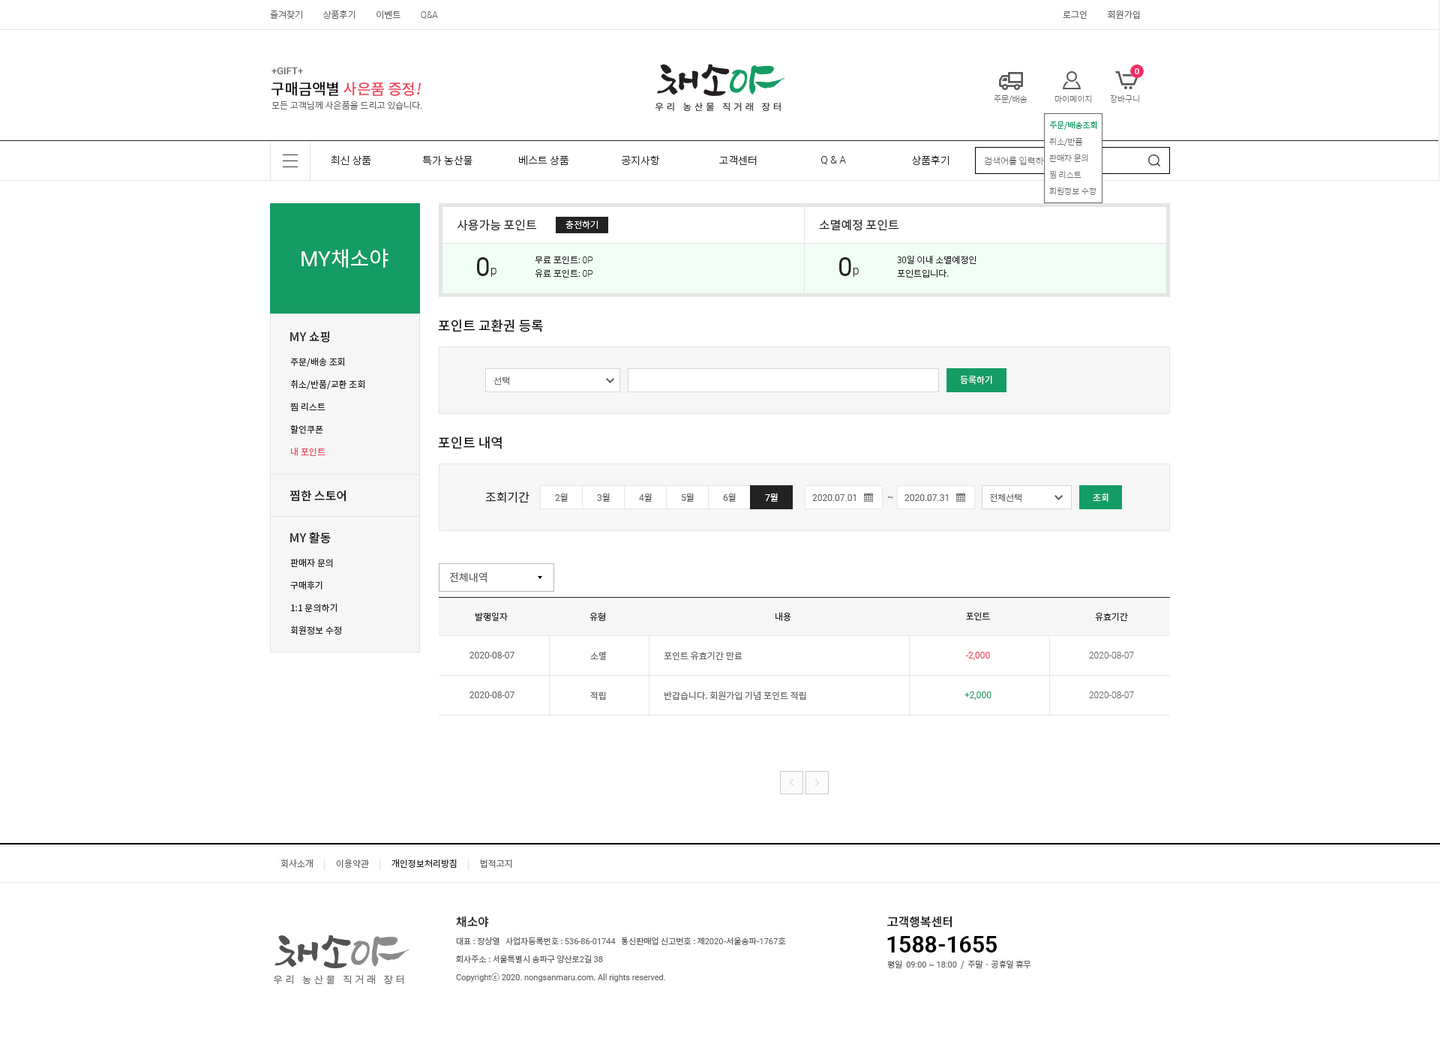
<style>
.page{position:relative;width:1440px;height:1050px;background:#ffffff}
.page>*{position:absolute;margin:0}
.t1{font:9px "NotoSansCJKkr-Light";color:#666666}
.t2{font:9px "Roboto-Light";color:#666666}
.t3{font:9px "NotoSansCJKkr-DemiLight";color:#666666}
.t4{font:9.8px "Roboto-Medium";color:#666666}
.t5{font:15px "NotoSansCJKkr-Medium";color:#ea475c}
.t6{font:15px "NotoSansCJKkr-Medium";color:#000000}
.t7{font:15px "NotoSansCJKkr-Medium";color:#ea475c;font-style:italic}
.t8{font:8.2px "NotoSansCJKkr-Thin";color:#666666}
.t9{font:8.2px/16.5px "NotoSansCJKkr-Thin";color:#666666}
.t10{font:8.2px/16.5px "NotoSansCJKkr-Regular";color:#159c65}
.t11{font:10.5px "NotoSansCJKkr-Light";color:#222222}
.t12{font:10.5px "Roboto-Light";color:#222222}
.t13{font:9px "NotoSansCJKkr-Thin";color:#666666}
.t14{font:12px "NotoSansCJKkr-Regular";color:#222222}
.t15{font:9px "NotoSansCJKkr-Light";color:#ffffff}
.t16{font:21px "NotoSansCJKkr-Regular";color:#ffffff}
.t17{font:21px "Roboto-Regular";color:#ffffff}
.t18{font:26.2px "Roboto-Regular";color:#222222}
.t19{font:12px "Roboto-Light";color:#222222}
.t20{font:9px/13.5px "NotoSansCJKkr-Light";color:#222222}
.t21{font:9px/13.5px "Roboto-Light";color:#222222}
.t22{font:13.5px "NotoSansCJKkr-Regular";color:#000000}
.t23{font:12px "NotoSansCJKkr-Medium";color:#222222}
.t24{font:9px/22.5px "NotoSansCJKkr-Regular";color:#222222}
.t25{font:9px/22.5px "NotoSansCJKkr-Regular";color:#ea475c}
.t26{font:9px "NotoSansCJKkr-Regular";color:#ffffff}
.t27{font:9px "Roboto-Regular";color:#666666}
.t28{font:9px "NotoSansCJKkr-Regular";color:#666666}
.t29{font:9px "Roboto-Regular";color:#ffffff}
.t30{font:10.5px "NotoSansCJKkr-Regular";color:#666666}
.t31{font:9px "NotoSansCJKkr-Regular";color:#222222}
.t32{font:9px "Roboto-Regular";color:#ea475c}
.t33{font:9px "Roboto-Regular";color:#159c65}
</style>
<div class="page">
<p class="t1" style="left:270px;top:10px;width:168px;height:10px">즐겨찾기          상품후기          이벤트          <span class="t2">Q&amp;A</span></p>
<p class="t3" style="left:1063px;top:10px;width:77px;height:10px">로그인          회원가입</p>
<p class="t4" style="left:272px;top:68px;width:31px;height:6px">+GIFT+</p>
<p class="t5" style="left:272px;top:82px;width:150px;height:14px"><span class="t6">구매금액별 </span>사은품 증정<span class="t7">!</span></p>
<p class="t1" style="left:272px;top:100px;width:150px;height:10px">모든 고객님께 사은품을 드리고 있습니다.</p>
<p class="t8" style="left:994px;top:94px;width:34px;height:10px">주문/배송</p>
<p class="t8" style="left:1054px;top:95px;width:38px;height:9px">마이페이지</p>
<p class="t8" style="left:1110px;top:94px;width:29px;height:10px">장바구니</p>
<p class="t9" style="left:1049px;top:121px;width:48px;height:74px"><span class="t10">주문/배송조회<br></span>취소/반품<br>판매자 문의<br>찜 리스트<br>회원정보 수정</p>
<p class="t11" style="left:331px;top:155px;width:40px;height:10px">최신 상품</p>
<p class="t11" style="left:422px;top:155px;width:50px;height:11px">특가 농산물</p>
<p class="t11" style="left:519px;top:155px;width:50px;height:11px">베스트 상품</p>
<p class="t11" style="left:622px;top:155px;width:38px;height:11px">공지사항</p>
<p class="t11" style="left:719px;top:155px;width:38px;height:11px">고객센터</p>
<p class="t12" style="left:821px;top:156px;width:25px;height:9px">Q &amp; A</p>
<p class="t11" style="left:912px;top:155px;width:38px;height:11px">상품후기</p>
<p class="t13" style="left:984px;top:156px;width:76px;height:10px">검색어를 입력하세요</p>
<p class="t14" style="left:457px;top:219px;width:79px;height:12px">사용가능 포인트</p>
<p class="t15" style="left:566px;top:220px;width:32px;height:10px">충전하기</p>
<p class="t14" style="left:819px;top:219px;width:79px;height:12px">소멸예정 포인트</p>
<p class="t16" style="left:302px;top:248px;width:86px;height:20px"><span class="t17">MY</span>채소야</p>
<p class="t18" style="left:477px;top:257px;width:19px;height:20px">0<span class="t19">p</span></p>
<p class="t20" style="left:535px;top:256px;width:58px;height:22px">무료 포인트: <span class="t21">0P<br></span>유료 포인트: <span class="t21">0P</span></p>
<p class="t18" style="left:839px;top:257px;width:20px;height:20px">0<span class="t19">p</span></p>
<p class="t20" style="left:897px;top:255px;width:79px;height:23px">30일 이내 소멸예정인<br>포인트입니다.</p>
<p class="t22" style="left:438px;top:319px;width:105px;height:13px">포인트 교환권 등록</p>
<p class="t23" style="left:290px;top:331px;width:39px;height:12px">MY 쇼핑</p>
<p class="t24" style="left:290px;top:357px;width:74px;height:99px">주문/배송 조회<br>취소/반품/교환 조회<br>찜 리스트<br>할인쿠폰<br><span class="t25">내 포인트</span></p>
<p class="t1" style="left:494px;top:376px;width:15px;height:9px">선택</p>
<p class="t26" style="left:960px;top:375px;width:32px;height:10px">등록하기</p>
<p class="t22" style="left:438px;top:436px;width:64px;height:13px">포인트 내역</p>
<p class="t23" style="left:290px;top:490px;width:56px;height:12px">찜한 스토어</p>
<p class="t14" style="left:485px;top:491px;width:45px;height:11px">조회기간</p>
<p class="t27" style="left:555px;top:493px;width:13px;height:9px">2<span class="t28">월</span></p>
<p class="t27" style="left:597px;top:493px;width:13px;height:9px">3<span class="t28">월</span></p>
<p class="t27" style="left:639px;top:493px;width:13px;height:9px">4<span class="t28">월</span></p>
<p class="t27" style="left:681px;top:493px;width:13px;height:9px">5<span class="t28">월</span></p>
<p class="t27" style="left:723px;top:493px;width:13px;height:9px">6<span class="t28">월</span></p>
<p class="t29" style="left:765px;top:493px;width:13px;height:9px">7<span class="t26">월</span></p>
<p class="t27" style="left:812px;top:494px;width:44px;height:7px">2020.07.01</p>
<p class="t27" style="left:887px;top:496px;width:6px;height:2px">~</p>
<p class="t27" style="left:904px;top:494px;width:44px;height:7px">2020.07.31</p>
<p class="t1" style="left:990px;top:494px;width:32px;height:8px">전체선택</p>
<p class="t26" style="left:1093px;top:493px;width:15px;height:9px">조회</p>
<p class="t23" style="left:290px;top:532px;width:41px;height:12px">MY 활동</p>
<p class="t24" style="left:290px;top:558px;width:51px;height:76px">판매자 문의<br>구매후기<br>1:1 문의하기<br>회원정보 수정</p>
<p class="t30" style="left:450px;top:572px;width:37px;height:11px">전체내역</p>
<p class="t31" style="left:476px;top:612px;width:32px;height:9px">발행일자</p>
<p class="t31" style="left:590px;top:612px;width:15px;height:9px">유형</p>
<p class="t31" style="left:776px;top:612px;width:15px;height:9px">내용</p>
<p class="t31" style="left:966px;top:612px;width:24px;height:8px">포인트</p>
<p class="t31" style="left:1095px;top:612px;width:33px;height:9px">유효기간</p>
<p class="t27" style="left:470px;top:652px;width:44px;height:6px">2020-08-07</p>
<p class="t28" style="left:590px;top:651px;width:16px;height:9px">소멸</p>
<p class="t28" style="left:664px;top:651px;width:78px;height:9px">포인트 유효기간 만료</p>
<p class="t32" style="left:965px;top:652px;width:25px;height:8px">-2,000</p>
<p class="t2" style="left:1089px;top:652px;width:45px;height:6px">2020-08-07</p>
<p class="t27" style="left:470px;top:692px;width:44px;height:6px">2020-08-07</p>
<p class="t28" style="left:590px;top:692px;width:16px;height:8px">적립</p>
<p class="t28" style="left:664px;top:691px;width:142px;height:9px">반갑습니다. 회원가입 기념 포인트 적립</p>
<p class="t33" style="left:964px;top:692px;width:28px;height:8px">+2,000</p>
<p class="t2" style="left:1089px;top:692px;width:45px;height:6px">2020-08-07</p>
</div>
